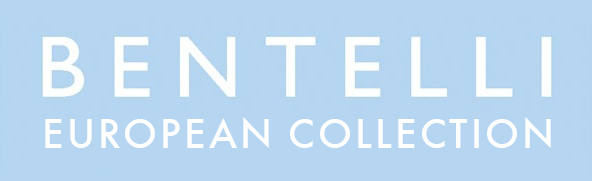
<style>
.page{position:relative;width:592px;height:181px;background:#b6d5f1}
.page>*{position:absolute;margin:0}
.t1{font:37.5px "Futura-Medium";letter-spacing:0.014em;color:#ffffff;text-transform:uppercase}
</style>
<div class="page">
<p class="t1" style="left:45px;top:117px;width:506px;height:31px">EuropeanCollection</p>
</div>
